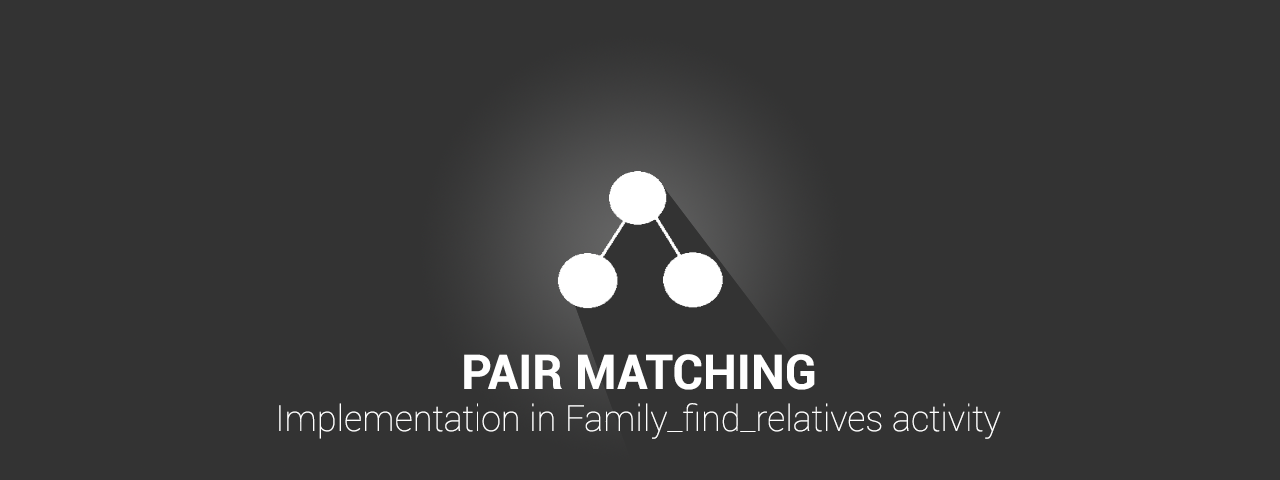
<style>
.page{position:relative;width:1280px;height:480px;background:#333333}
.page>*{position:absolute;margin:0}
.t1{font:48px "Roboto-Bold";color:#ffffff}
.t2{font:36px "Roboto-Thin";color:#ffffff}
</style>
<div class="page">
<p class="t1" style="left:464px;top:354px;width:351px;height:36px">PAIR MATCHING</p>
<p class="t2" style="left:279px;top:403px;width:722px;height:36px">Implementation in Family_find_relatives activity</p>
</div>
